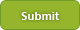
<style>
.page{position:relative;width:80px;height:30px;background:#94b52c}
.page>*{position:absolute;margin:0}
.t1{font:12px "FrugalSans-Bold";color:#ffffff}
</style>
<div class="page">
<p class="t1" style="left:21px;top:12px;width:38px;height:8px">Submit</p>
</div>
